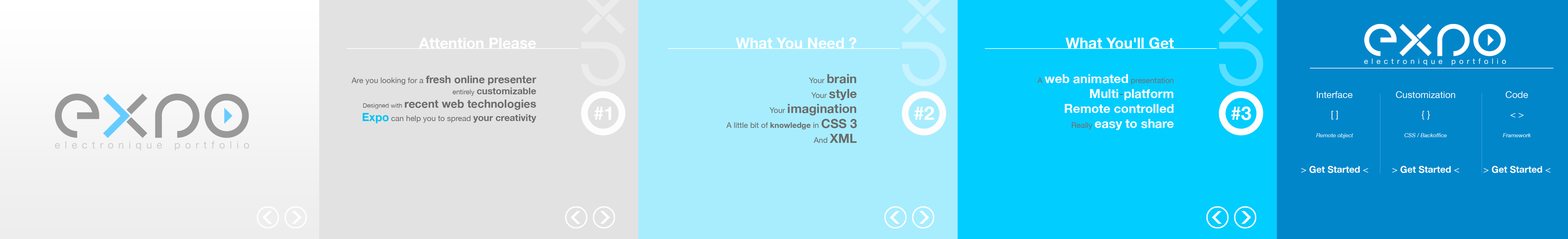
<style>
.page{position:relative;width:1568px;height:239px}
.page>*{position:absolute;margin:0}
.t1{font:15px "HelveticaNeue-Bold";color:#ffffff}
.t2{font:11.2px "HelveticaNeue-Bold";color:#6b6b6b}
.t3{font:7.8px "HelveticaNeue";color:#6b6b6b}
.t4{font:10.6px "HelveticaNeue-Bold";color:#6b6b6b}
.t5{font:6.9px "HelveticaNeue";color:#6b6b6b}
.t6{font:9.4px "HelveticaNeue-Bold";color:#6b6b6b}
.t7{font:6.2px "HelveticaNeue";color:#6b6b6b}
.t8{font:11.2px "HelveticaNeue-Bold";color:#04c2f1}
.t9{font:12.5px "HelveticaNeue-Bold";color:#6b6b6b}
.t10{font:7.8px "HelveticaNeue-Bold";color:#6b6b6b}
.t11{font:12.5px "HelveticaNeue-Bold";color:#ffffff}
.t12{font:7.8px "HelveticaNeue";color:#6f6f6f}
.t13{font:12.5px "HelveticaNeue";color:#6f6f6f}
.t14{font:9.4px "HelveticaNeue";color:#ffffff}
.t15{font:18.7px "HelveticaNeue-Bold";color:#ffffff}
.t16{font:5.6px "HelveticaNeue-Italic";color:#ffffff}
.t17{font:9.4px "HelveticaNeue-Bold";color:#ffffff}
</style>
<div class="page">
<p class="t1" style="left:419px;top:38px;width:117px;height:11px">Attention Please</p>
<p class="t1" style="left:736px;top:37px;width:121px;height:12px">What You Need ?</p>
<p class="t1" style="left:1065px;top:37px;width:109px;height:12px">What You'll Get</p>
<p class="t2" style="left:351px;top:76px;width:185px;height:47px;text-align:right"><span class="t3">Are you looking for a </span><span class="t4">fresh online presenter<br></span><span class="t5">entirely </span><span class="t6">customizable<br></span><span class="t7">Designed with </span>recent web technologies<br><span class="t8">Expo</span><span class="t3"> can help you to spread </span><span class="t6">your creativity</span></p>
<p class="t3" style="left:726px;top:74px;width:131px;height:69px;text-align:right">Your <span class="t9">brain<br></span>Your <span class="t9">style<br></span>Your <span class="t9">imagination<br></span>A little bit of <span class="t10">knowledge</span> in <span class="t9">CSS 3<br></span>And <span class="t9">XML</span></p>
<p class="t11" style="left:1037px;top:74px;width:137px;height:56px;text-align:right"><span class="t12">A </span>web animated <span class="t12">presentation<br></span>Multi<span class="t13">-</span>platform<br>Remote controlled<br><span class="t12">Really </span>easy to share</p>
<p class="t14" style="left:1317px;top:91px;width:36px;height:7px">Interface</p>
<p class="t14" style="left:1396px;top:91px;width:59px;height:7px">Customization</p>
<p class="t14" style="left:1506px;top:91px;width:22px;height:7px">Code</p>
<p class="t15" style="left:594px;top:107px;width:17px;height:13px">#1</p>
<p class="t15" style="left:914px;top:107px;width:20px;height:13px">#2</p>
<p class="t15" style="left:1231px;top:107px;width:20px;height:13px">#3</p>
<p class="t14" style="left:1331px;top:111px;width:7px;height:9px">[ ]</p>
<p class="t14" style="left:1422px;top:111px;width:8px;height:9px">{ }</p>
<p class="t14" style="left:1510px;top:113px;width:14px;height:5px">&lt; &gt;</p>
<p class="t16" style="left:1316px;top:133px;width:37px;height:6px">Remote object</p>
<p class="t16" style="left:1404px;top:133px;width:43px;height:4px">CSS / Backoffice</p>
<p class="t16" style="left:1503px;top:133px;width:28px;height:4px">Framework</p>
<p class="t17" style="left:1301px;top:166px;width:67px;height:7px"><span class="t14">&gt;</span> Get Started <span class="t14">&lt;</span></p>
<p class="t17" style="left:1392px;top:166px;width:67px;height:7px"><span class="t14">&gt;</span> Get Started <span class="t14">&lt;</span></p>
<p class="t17" style="left:1484px;top:166px;width:67px;height:7px"><span class="t14">&gt;</span> Get Started <span class="t14">&lt;</span></p>
</div>
